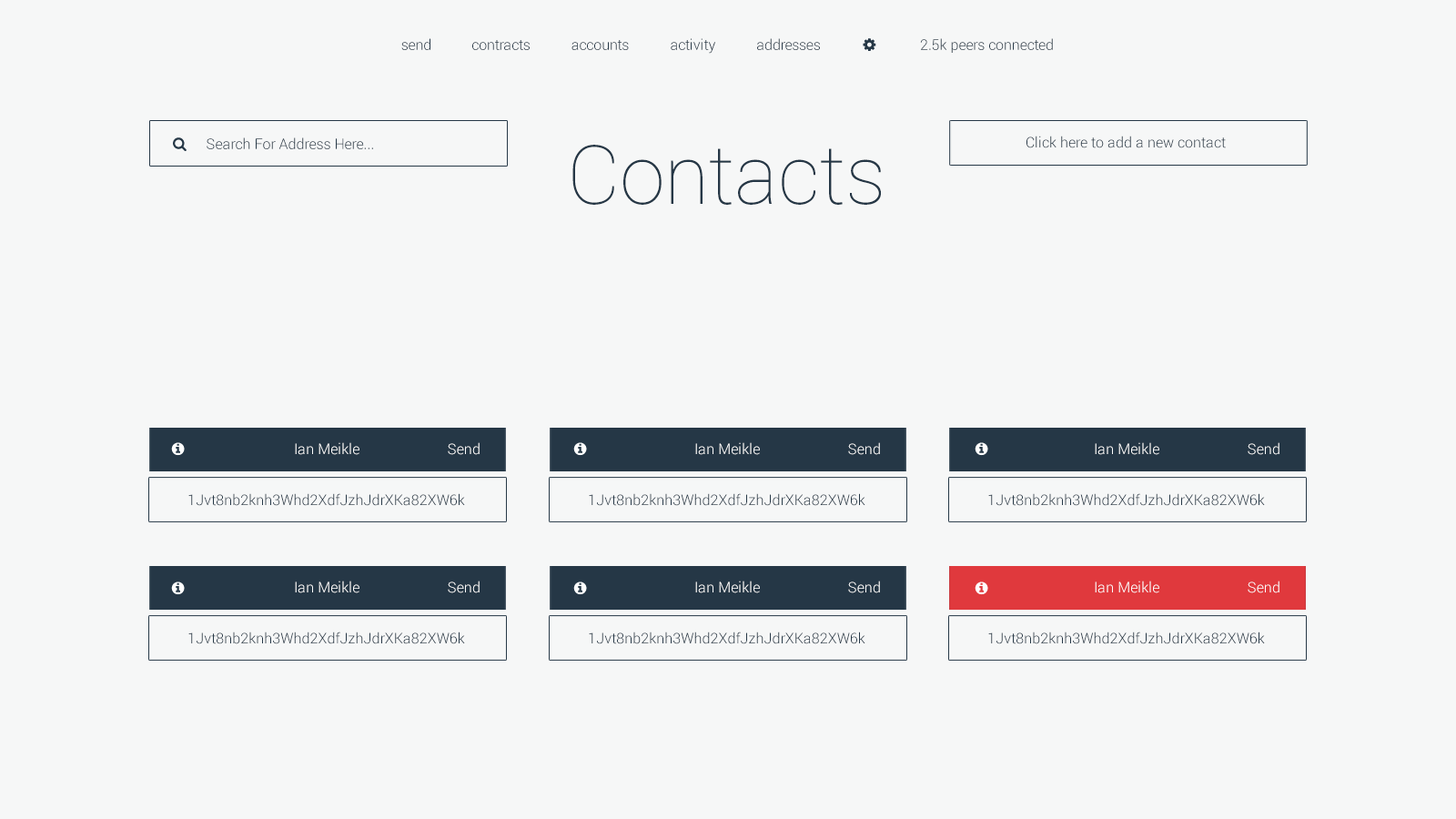
<style>
.page{position:relative;width:1456px;height:819px;background:#f6f7f7}
.page>*{position:absolute;margin:0}
.t1{font:14.6px "Roboto-Light";color:#253746}
.t2{font:81.9px "Roboto-Thin";color:#253746}
.t3{font:14.6px "Roboto-Light";color:#ffffff}
</style>
<div class="page">
<p class="t1" style="left:401px;top:38px;width:29px;height:12px">send</p>
<p class="t1" style="left:472px;top:40px;width:58px;height:10px">contracts</p>
<p class="t1" style="left:571px;top:40px;width:58px;height:10px">accounts</p>
<p class="t1" style="left:671px;top:38px;width:44px;height:16px">activity</p>
<p class="t1" style="left:757px;top:38px;width:63px;height:12px">addresses</p>
<p class="t1" style="left:920px;top:38px;width:133px;height:15px">2.5k peers connected</p>
<p class="t1" style="left:207px;top:137px;width:166px;height:12px">Search For Address Here...</p>
<p class="t1" style="left:1026px;top:136px;width:200px;height:12px">Click here to add a new contact</p>
<p class="t2" style="left:572px;top:145px;width:309px;height:60px">Contacts</p>
<p class="t3" style="left:295px;top:442px;width:64px;height:13px">Ian Meikle</p>
<p class="t3" style="left:448px;top:442px;width:32px;height:13px">Send</p>
<p class="t3" style="left:695px;top:442px;width:65px;height:13px">Ian Meikle</p>
<p class="t3" style="left:848px;top:442px;width:32px;height:13px">Send</p>
<p class="t3" style="left:1095px;top:442px;width:64px;height:13px">Ian Meikle</p>
<p class="t3" style="left:1248px;top:442px;width:31px;height:13px">Send</p>
<p class="t1" style="left:188px;top:493px;width:277px;height:13px">1Jvt8nb2knh3Whd2XdfJzhJdrXKa82XW6k</p>
<p class="t1" style="left:589px;top:493px;width:276px;height:13px">1Jvt8nb2knh3Whd2XdfJzhJdrXKa82XW6k</p>
<p class="t1" style="left:988px;top:493px;width:277px;height:13px">1Jvt8nb2knh3Whd2XdfJzhJdrXKa82XW6k</p>
<p class="t3" style="left:295px;top:581px;width:64px;height:12px">Ian Meikle</p>
<p class="t3" style="left:448px;top:581px;width:32px;height:12px">Send</p>
<p class="t3" style="left:695px;top:581px;width:65px;height:12px">Ian Meikle</p>
<p class="t3" style="left:848px;top:581px;width:32px;height:12px">Send</p>
<p class="t3" style="left:1095px;top:581px;width:64px;height:12px">Ian Meikle</p>
<p class="t3" style="left:1248px;top:581px;width:31px;height:12px">Send</p>
<p class="t1" style="left:188px;top:632px;width:277px;height:12px">1Jvt8nb2knh3Whd2XdfJzhJdrXKa82XW6k</p>
<p class="t1" style="left:589px;top:632px;width:276px;height:12px">1Jvt8nb2knh3Whd2XdfJzhJdrXKa82XW6k</p>
<p class="t1" style="left:988px;top:632px;width:277px;height:12px">1Jvt8nb2knh3Whd2XdfJzhJdrXKa82XW6k</p>
</div>
